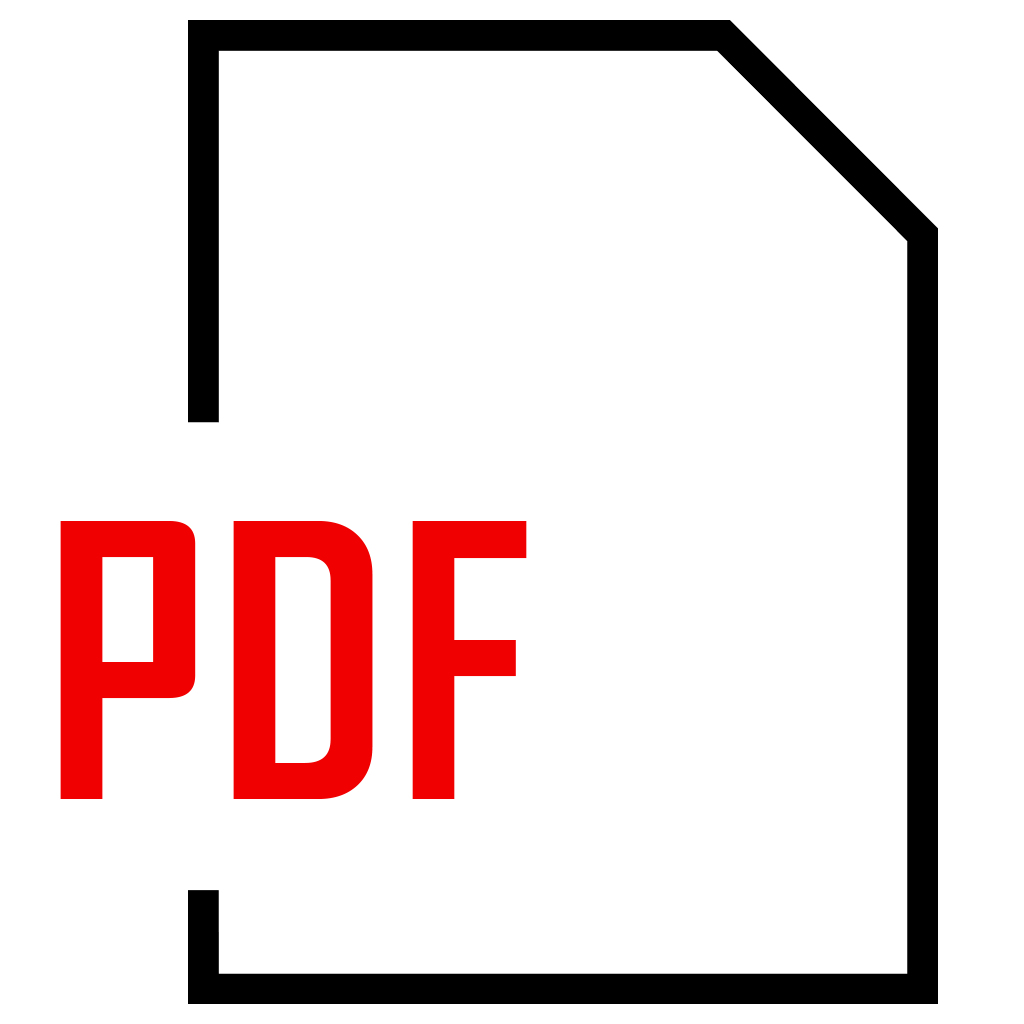
<style>
.page{position:relative;width:1024px;height:1024px;background:#ffffff}
.page>*{position:absolute;margin:0}
.t1{font:363.8px "AgencyFB-Bold";letter-spacing:0.025em;color:#f00000}
</style>
<div class="page">
<p class="t1" style="left:60px;top:521px;width:467px;height:278px">PDF</p>
</div>
